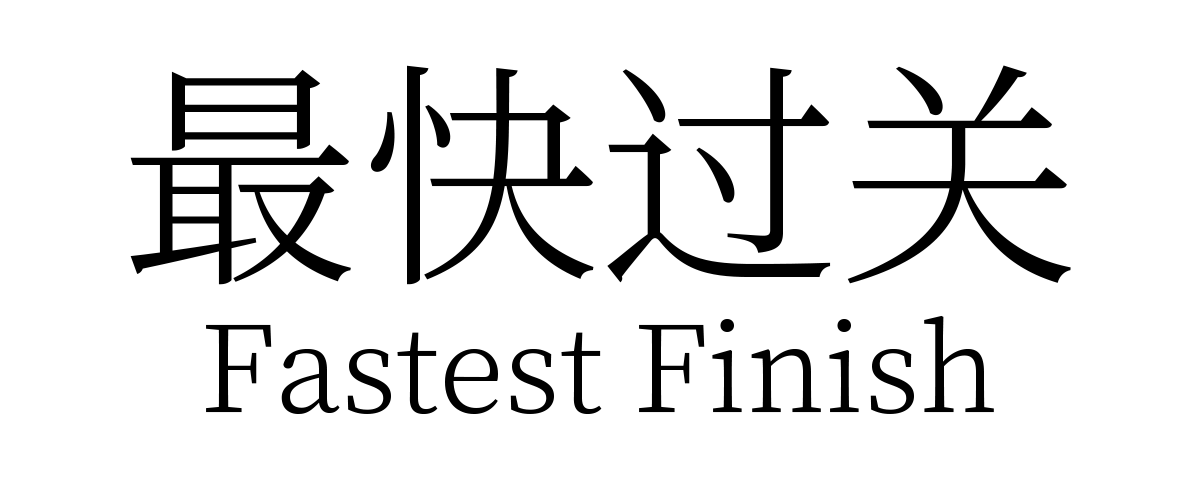
<style>
.page{position:relative;width:1200px;height:480px;background:#ffffff}
.page>*{position:absolute;margin:0}
.t1{font:240px "SourceHanSerifCN-Light";color:#000000}
.t2{font:120px "SourceHanSerifCN-Light";color:#000000}
</style>
<div class="page">
<p class="t1" style="left:130px;top:65px;width:941px;height:220px">最快过关</p>
<p class="t2" style="left:206px;top:315px;width:788px;height:100px">Fastest Finish</p>
</div>
